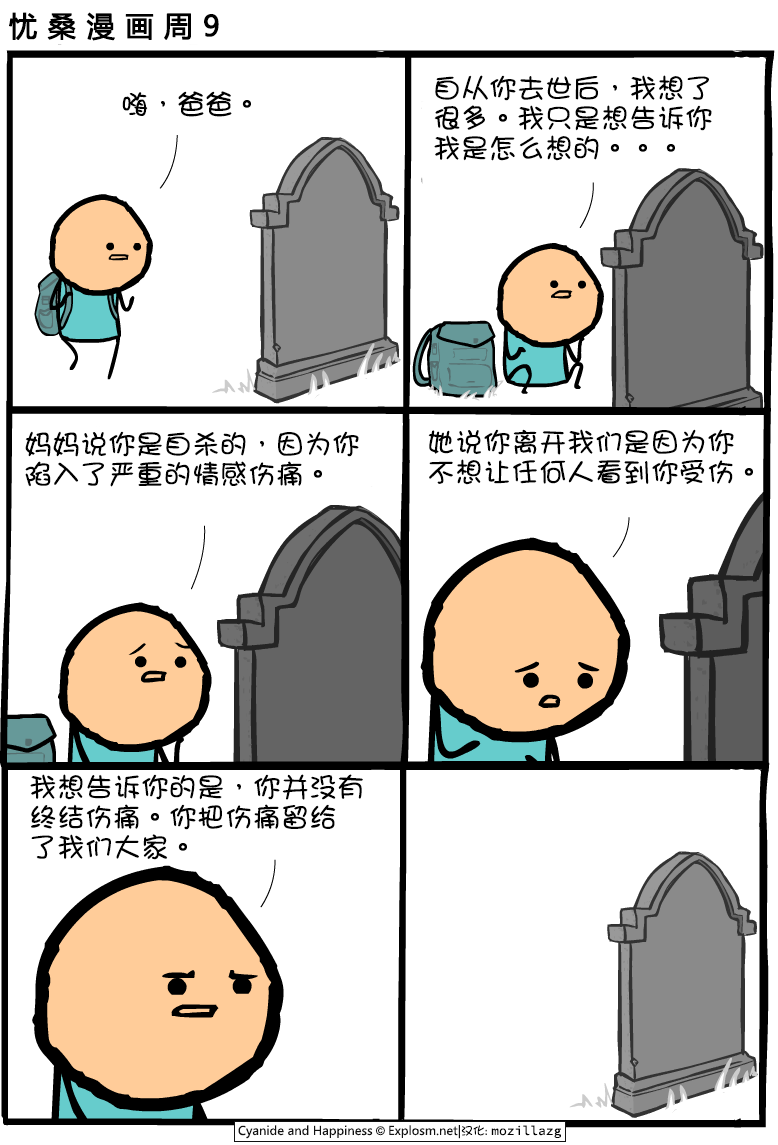
<style>
.page{position:relative;width:778px;height:1145px;background:#ffffff}
.page>*{position:absolute;margin:0}
.t1{font:28px "MicrosoftYaHei";letter-spacing:0.36em;color:#000000;font-weight:bold}
.t2{font:28px/30px "DFGirl";color:#000000}
.t3{font:28px "DFGirl";color:#000000}
</style>
<div class="page">
<p class="t1" style="left:9px;top:12px;width:210px;height:29px">忧桑漫画周9</p>
<p class="t2" style="left:434px;top:75px;width:278px;height:86px">自从你去世后，我想了<br>很多。我只是想告诉你<br>我是怎么想的。。。</p>
<p class="t3" style="left:122px;top:91px;width:129px;height:26px">嗨，爸爸。</p>
<p class="t2" style="left:25px;top:431px;width:334px;height:56px">妈妈说你是自杀的，因为你<br>陷入了严重的情感伤痛。</p>
<p class="t2" style="left:428px;top:429px;width:325px;height:56px">她说你离开我们是因为你<br>不想让任何人看到你受伤。</p>
<p class="t2" style="left:30px;top:774px;width:333px;height:86px">我想告诉你的是，你并没有<br>终结伤痛。你把伤痛留给<br>了我们大家。</p>
</div>
